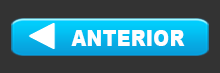
<style>
.page{position:relative;width:220px;height:73px;background:#333333}
.page>*{position:absolute;margin:0}
.t1{font:22.3px "Arial-Black";color:#fefdfd;scale:0.87 1}
</style>
<div class="page">
<p class="t1" style="left:71px;top:30px;width:114px;height:16px">ANTERIOR</p>
</div>
